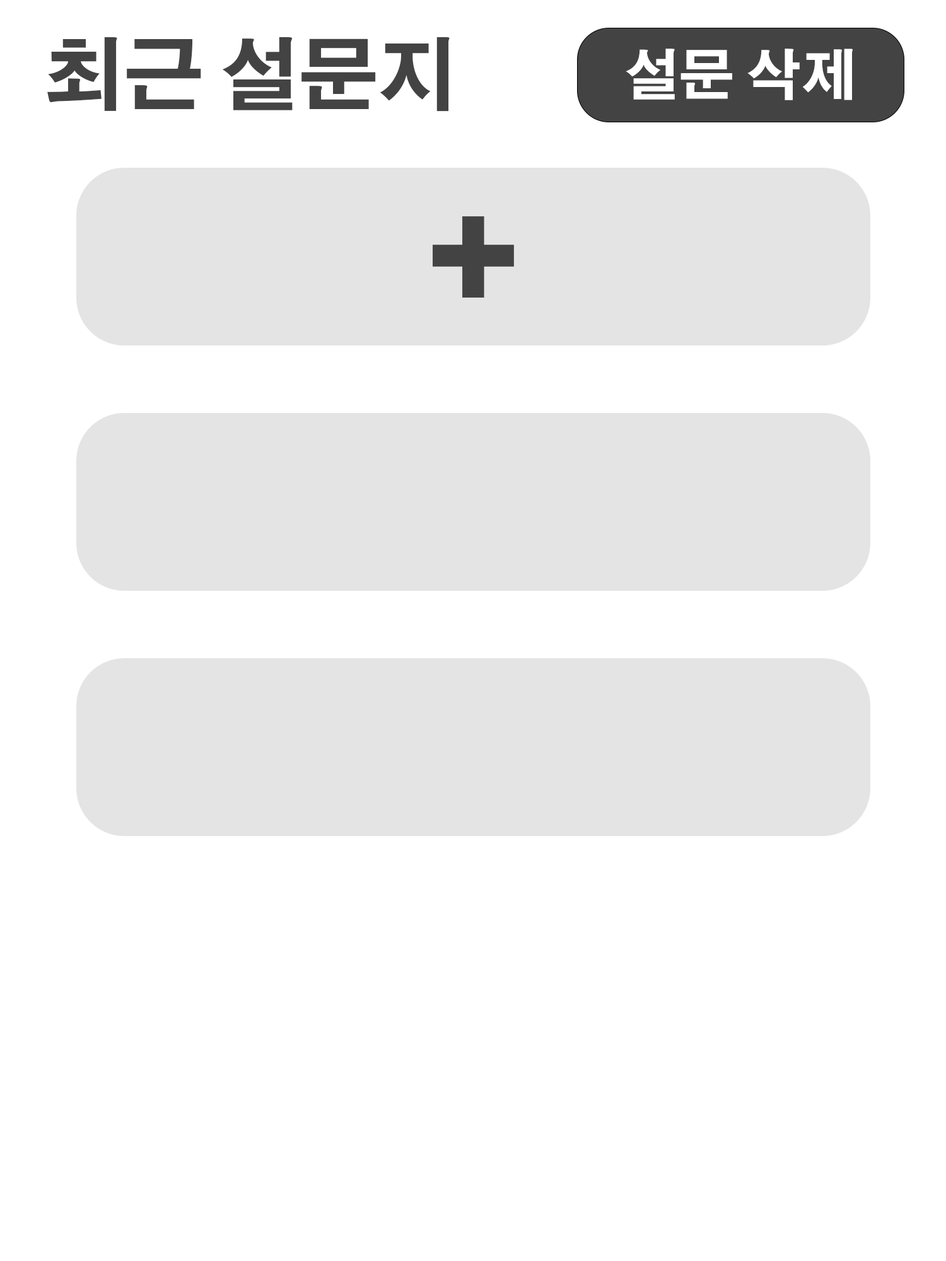
<style>
.page{position:relative;width:946px;height:1261px;background:#ffffff}
.page>*{position:absolute;margin:0}
.t1{font:78.8px "AdobeGothicStd-Bold";color:#434343}
.t2{font:54.8px "AdobeGothicStd-Bold";color:#ffffff}
</style>
<div class="page">
<p class="t1" style="left:47px;top:37px;width:403px;height:75px">최근 설문지</p>
<p class="t2" style="left:625px;top:49px;width:227px;height:51px">설문 삭제</p>
</div>
